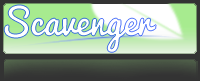
<style>
.page{position:relative;width:200px;height:81px}
.page>*{position:absolute;margin:0}
.t1{font:36px "Pacifico";color:#ffffff}
</style>
<div class="page">
<p class="t1" style="left:4px;top:5px;width:152px;height:48px">Scavenger</p>
</div>
